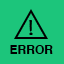
<style>
.page{position:relative;width:64px;height:64px;background:#1cc57b}
.page>*{position:absolute;margin:0}
.t1{font:12px "Helvetica-Bold";color:#000000}
</style>
<div class="page">
<p class="t1" style="left:10px;top:45px;width:43px;height:9px">ERROR</p>
</div>
